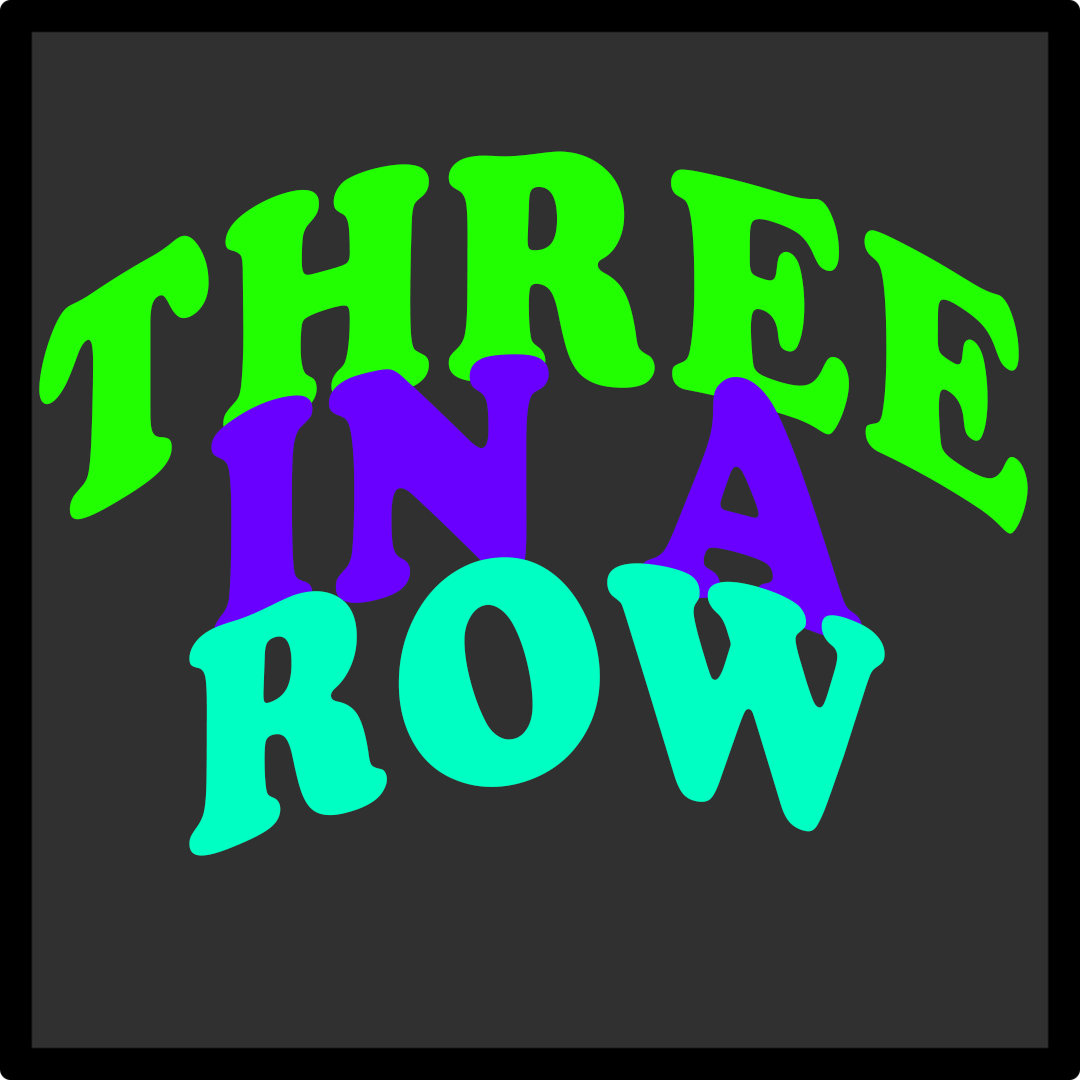
<style>
.page{position:relative;width:1080px;height:1080px;background:#303030}
.page>*{position:absolute;margin:0}
.t1{font:331.8px/202.6px "CooperBlack";letter-spacing:0.04em;color:#22ff00;scale:0.78 1}
.t2{font:331.8px/202.6px "CooperBlack";letter-spacing:0.04em;color:#6900ff;scale:0.78 1}
.t3{font:331.8px/202.6px "CooperBlack";letter-spacing:0.04em;color:#00ffc3;scale:0.78 1}
</style>
<div class="page">
<p class="t1" style="left:39px;top:151px;width:989px;height:705px;text-align:center">THREE<br><span class="t2">IN A<br></span><span class="t3">ROW</span></p>
</div>
